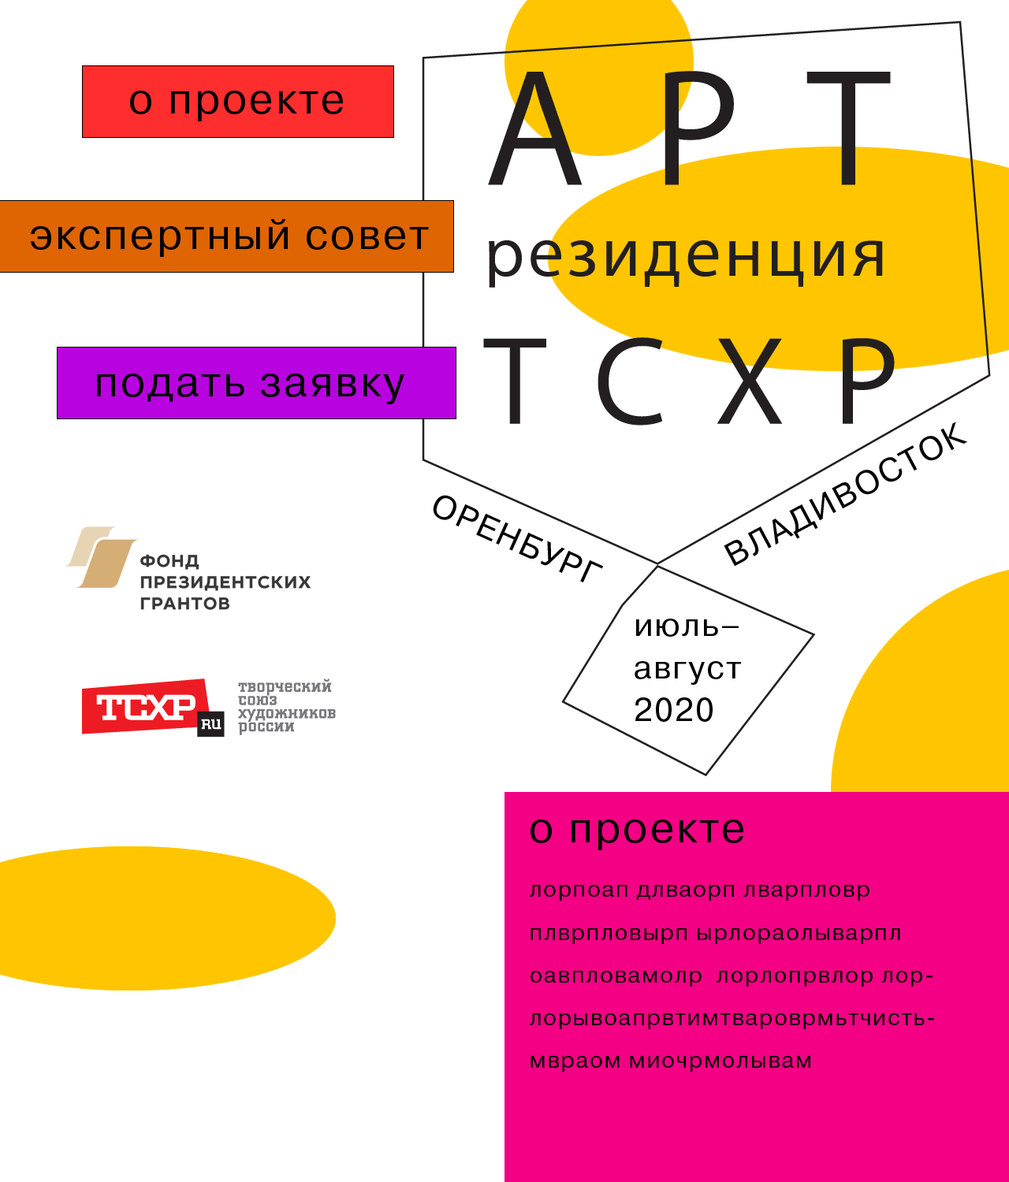
<style>
.page{position:relative;width:1009px;height:1182px;background:#ffffff}
.page>*{position:absolute;margin:0}
.t1{font:42.7px "PragmaticaBook-Reg";letter-spacing:0.05em;color:#000000}
.t2{font:32.8px "PragmaticaBook-Reg";letter-spacing:0.05em;color:#000000}
.t3{font:32.8px/42.7px "PragmaticaBook-Reg";letter-spacing:0.05em;color:#000000}
.t4{font:23px/42.7px "PragmaticaBook-Reg";letter-spacing:0.05em;color:#000000}
</style>
<div class="page">
<p class="t1" style="left:130px;top:91px;width:213px;height:30px">о проекте</p>
<p class="t1" style="left:130px;top:91px;width:213px;height:30px">о проекте</p>
<p class="t1" style="left:31px;top:219px;width:398px;height:38px">экспертный совет</p>
<p class="t1" style="left:31px;top:219px;width:398px;height:38px">экспертный совет</p>
<p class="t1" style="left:97px;top:374px;width:307px;height:30px">подать заявку</p>
<p class="t1" style="left:97px;top:374px;width:307px;height:30px">подать заявку</p>
<p class="t2" style="left:723px;top:422px;width:245px;height:145px;rotate:-28deg">ВЛАДИВОСТОК</p>
<p class="t2" style="left:433px;top:495px;width:171px;height:87px;rotate:24deg">ОРЕНБУРГ</p>
<p class="t3" style="left:634px;top:619px;width:107px;height:103px">июль–<br>август<br>2020</p>
<p class="t1" style="left:530px;top:820px;width:213px;height:30px">о проекте</p>
<p class="t4" style="left:530px;top:885px;width:404px;height:187px">лорпоап длваорп лварпловр плврпловырп ырлораолыварпл оавпловамолр  лорлопрвлор лорлорывоапрвтимтвароврмьтчистьмвраом миочрмолывам</p>
</div>
